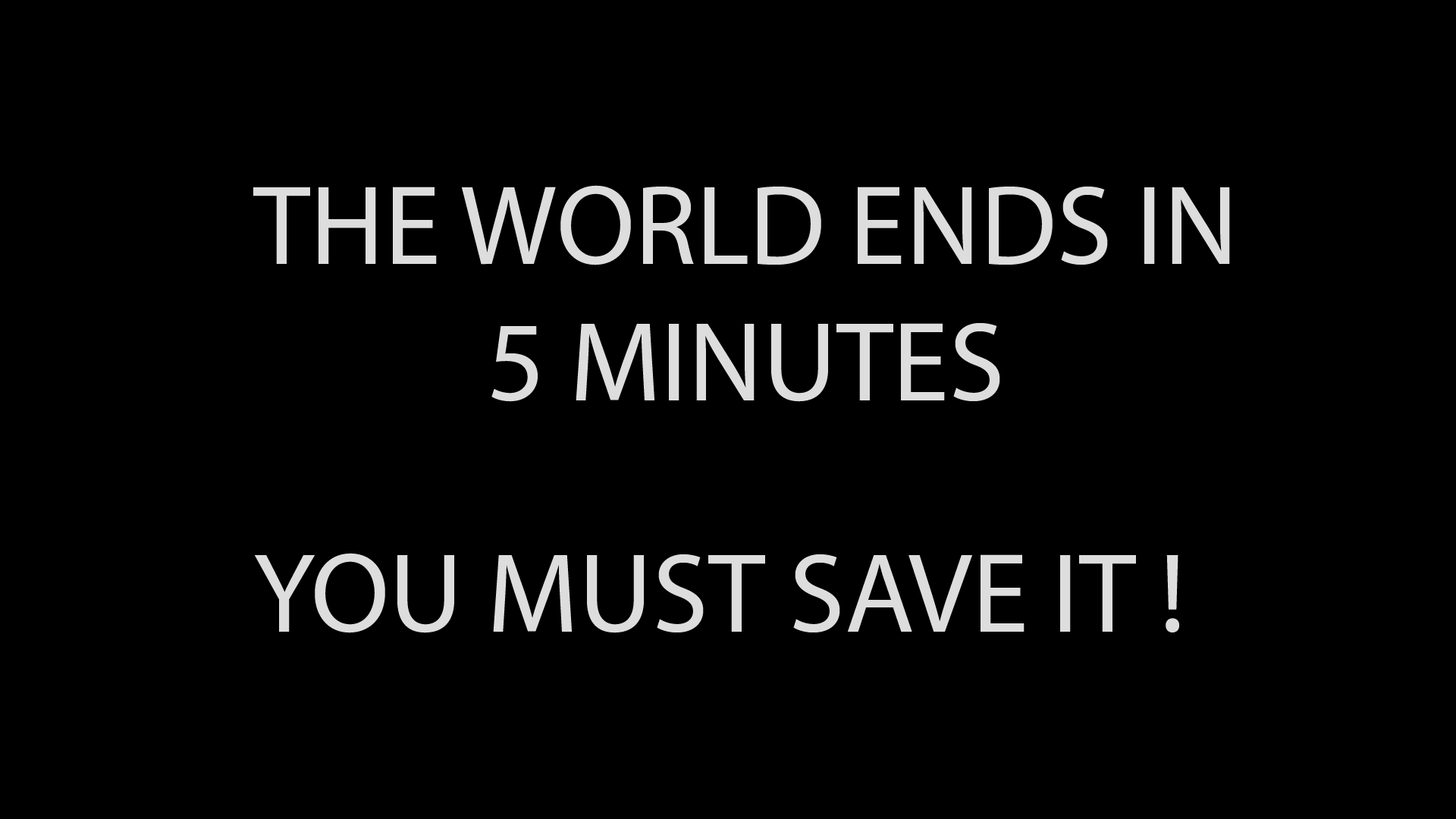
<style>
.page{position:relative;width:1456px;height:819px;background:#000000}
.page>*{position:absolute;margin:0}
.t1{font:113.7px "MyriadPro-Regular";color:#dddddd}
</style>
<div class="page">
<p class="t1" style="left:253px;top:185px;width:977px;height:217px;text-align:center">THE WORLD ENDS IN<br>5 MINUTES</p>
<p class="t1" style="left:254px;top:553px;width:925px;height:80px">YOU MUST SAVE IT !</p>
</div>
